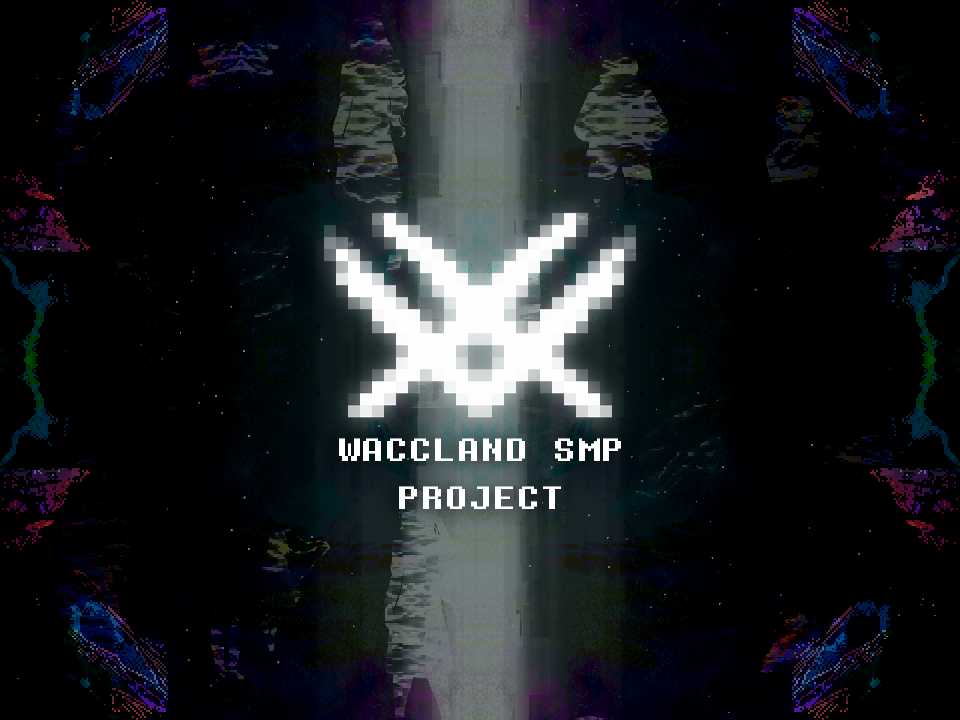
<style>
.page{position:relative;width:960px;height:720px;background:#000000}
.page>*{position:absolute;margin:0}
.t1{font:40.1px "DeterminationMonoWeb";color:#ffffff;scale:1.2 1}
</style>
<div class="page">
<p class="t1" style="left:339px;top:438px;width:282px;height:71px;text-align:center">WACCLAND SMP<br>PROJECT</p>
</div>
